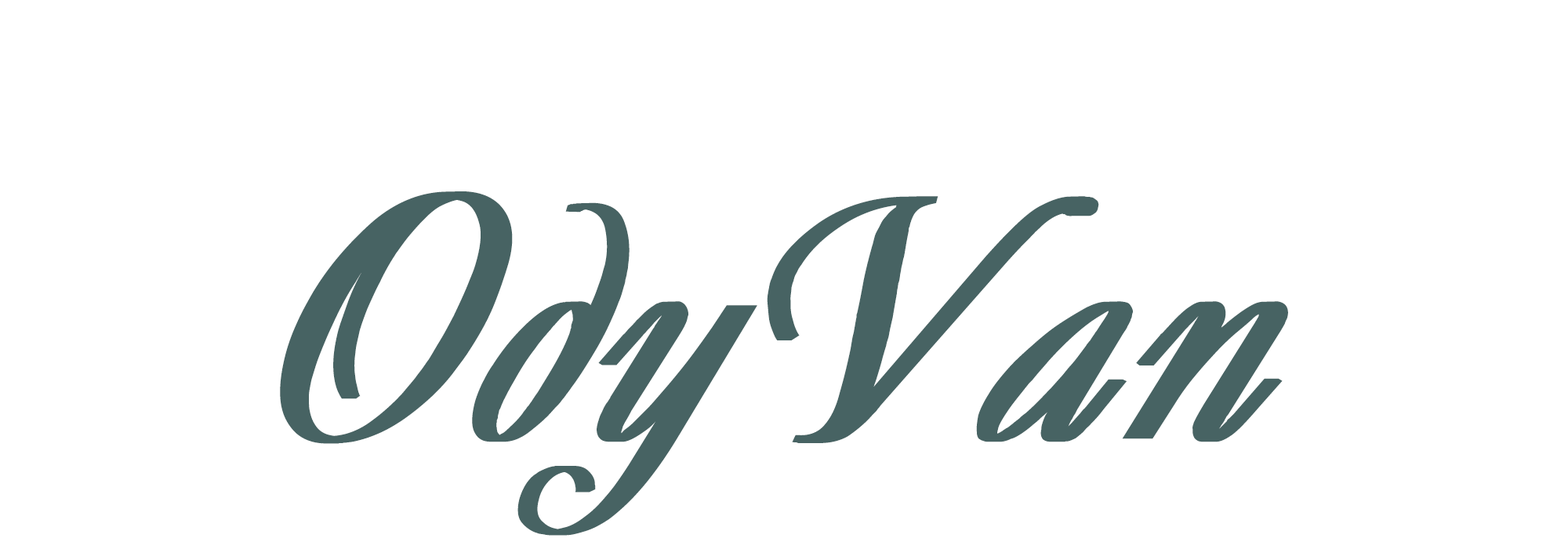
<style>
.page{position:relative;width:1568px;height:549px;background:#ffffff}
.page>*{position:absolute;margin:0}
.t1{font:352.8px "Decor-BoldItalic";color:#476363}
</style>
<div class="page">
<p class="t1" style="left:280px;top:191px;width:1008px;height:344px">OдyVan</p>
</div>
